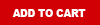
<style>
.page{position:relative;width:100px;height:25px;background:#d00005}
.page>*{position:absolute;margin:0}
.t1{font:18.2px "Arial-Black";color:#ffffff;scale:0.9 1}
</style>
<div class="page">
<p class="t1" style="left:12px;top:9px;width:74px;height:8px">ADD TO CART</p>
</div>
